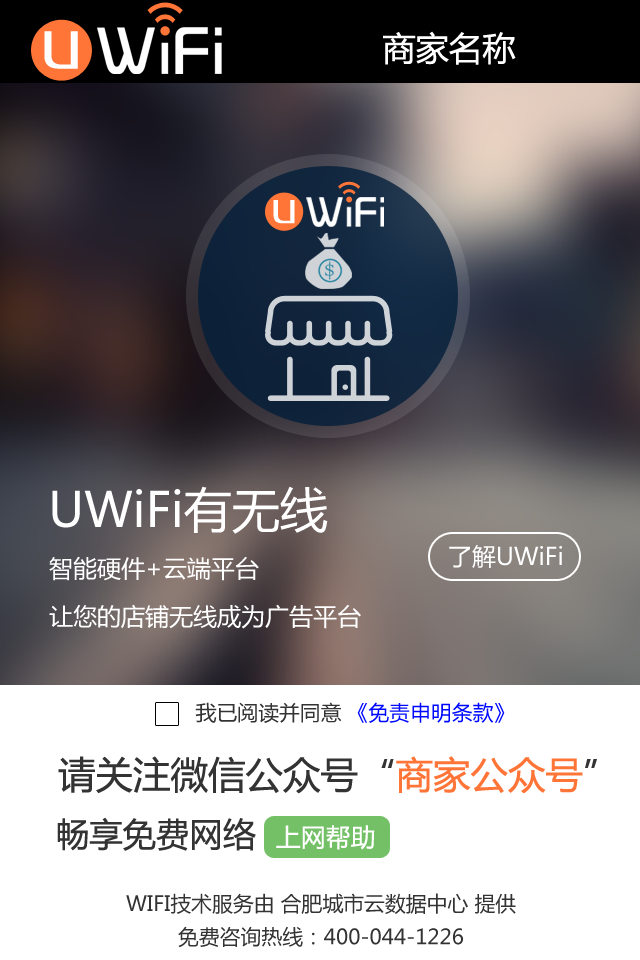
<style>
.page{position:relative;width:640px;height:960px;background:#ffffff}
.page>*{position:absolute;margin:0}
.t1{font:62.5px "FZZZHUNHJW--GB1-0";letter-spacing:0.05em;color:#ffffff}
.t2{font:33.3px "MicrosoftYaHei";color:#ffffff}
.t3{font:48px "MicrosoftYaHei";color:#ffffff}
.t4{font:24px "MicrosoftYaHei";color:#fefefe}
.t5{font:24px/48px "MicrosoftYaHei";color:#ffffff}
.t6{font:20.8px "MicrosoftYaHei";color:#0009ff}
.t7{font:20.8px "MicrosoftYaHei";color:#333333}
.t8{font:37.5px "MicrosoftYaHei";color:#333333}
.t9{font:37.5px "MicrosoftYaHei";color:#ff7437}
.t10{font:33.3px "MicrosoftYaHei";color:#333333}
.t11{font:25px "MicrosoftYaHei";color:#ffffff}
.t12{font:20.8px/33.3px "MicrosoftYaHei";color:#333333}
</style>
<div class="page">
<p class="t1" style="left:44px;top:31px;width:34px;height:38px">u</p>
<p class="t2" style="left:383px;top:31px;width:133px;height:34px">商家名称</p>
<p class="t3" style="left:52px;top:486px;width:276px;height:48px">UWiFi有无线</p>
<p class="t4" style="left:449px;top:545px;width:113px;height:23px">了解UWiFi</p>
<p class="t5" style="left:49px;top:556px;width:312px;height:73px">智能硬件+云端平台<br>让您的店铺无线成为广告平台</p>
<p class="t6" style="left:195px;top:702px;width:310px;height:21px"><span class="t7">我已阅读并同意 </span>《免责申明条款》</p>
<p class="t8" style="left:58px;top:756px;width:539px;height:38px">请关注微信公众号“<span class="t9">商家公众号</span>”</p>
<p class="t10" style="left:57px;top:817px;width:318px;height:34px">畅享免费网络  <span class="t11">上网帮助</span></p>
<p class="t12" style="left:126px;top:893px;width:390px;height:55px;text-align:center">WIFI技术服务由 合肥城市云数据中心 提供<br>免费咨询热线：400-044-1226</p>
</div>
